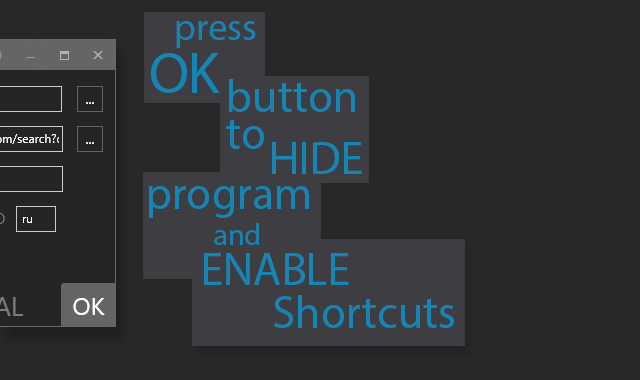
<style>
.page{position:relative;width:640px;height:380px;background:#282828}
.page>*{position:absolute;margin:0}
.t1{font:38px "MyriadPro-Regular";color:#1585b5}
.t2{font:58px "MyriadPro-Regular";color:#1585b5}
.t3{font:46px "MyriadPro-Regular";color:#1585b5}
.t4{font:30px "MyriadPro-Regular";color:#1585b5}
</style>
<div class="page">
<p class="t1" style="left:176px;top:21px;width:80px;height:27px">press</p>
<p class="t2" style="left:151px;top:53px;width:69px;height:40px">OK</p>
<p class="t3" style="left:228px;top:79px;width:127px;height:33px">button</p>
<p class="t3" style="left:226px;top:119px;width:38px;height:30px">to</p>
<p class="t3" style="left:272px;top:142px;width:90px;height:32px">HIDE</p>
<p class="t3" style="left:148px;top:186px;width:161px;height:32px">program</p>
<p class="t4" style="left:214px;top:223px;width:45px;height:22px">and</p>
<p class="t3" style="left:204px;top:253px;width:145px;height:32px">ENABLE</p>
<p class="t3" style="left:274px;top:295px;width:180px;height:33px">Shortcuts</p>
</div>
